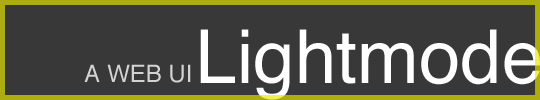
<style>
.page{position:relative;width:540px;height:100px;background:#383838}
.page>*{position:absolute;margin:0}
.t1{font:74.5px "Helvetica";color:#ffffff}
.t2{font:24px "Helvetica";color:#d3d3d3}
</style>
<div class="page">
<p class="t1" style="left:200px;top:29px;width:340px;height:71px">Lightmode</p>
<p class="t2" style="left:84px;top:64px;width:107px;height:19px">A WEB UI</p>
</div>
